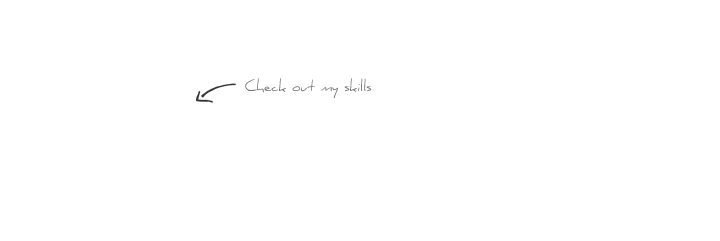
<style>
.page{position:relative;width:720px;height:241px;background:#ffffff}
.page>*{position:absolute;margin:0}
.t1{font:14px "Daniel";color:#737273}
</style>
<div class="page">
<p class="t1" style="left:245px;top:78px;width:127px;height:21px">Check out my skills</p>
</div>
